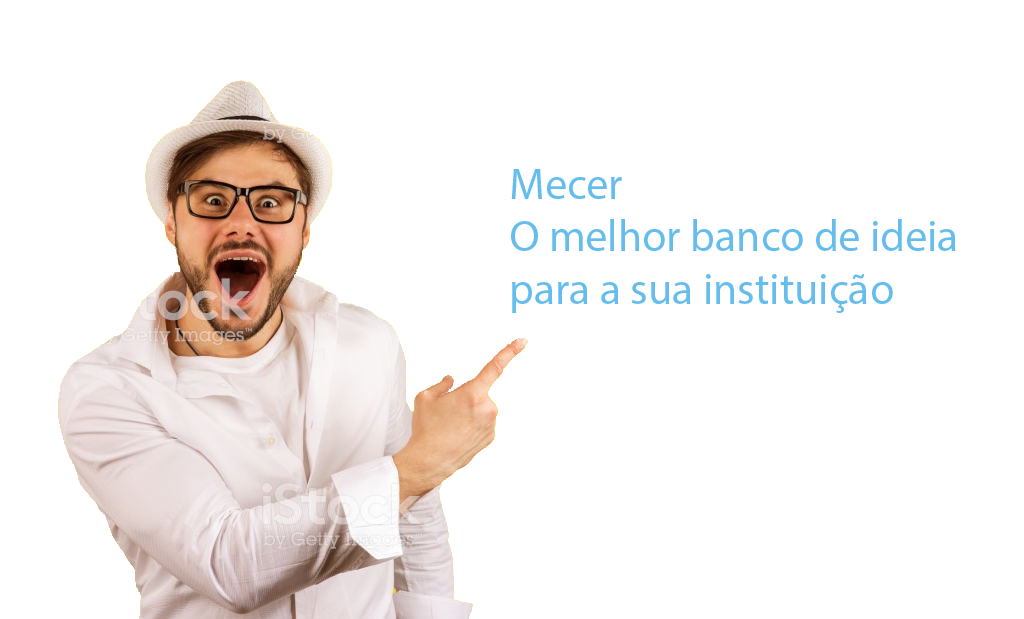
<style>
.page{position:relative;width:1024px;height:619px;background:#ffffff}
.page>*{position:absolute;margin:0}
.t1{font:44px "MyriadPro-Regular";color:#65bded}
.t2{font:16px "MyriadPro-Regular";color:#65bded}
</style>
<div class="page">
<p class="t1" style="left:511px;top:169px;width:445px;height:144px"><span class="t2"><br></span><br>Mecer<br>O melhor banco de ideia<br>para a sua instituição</p>
</div>
